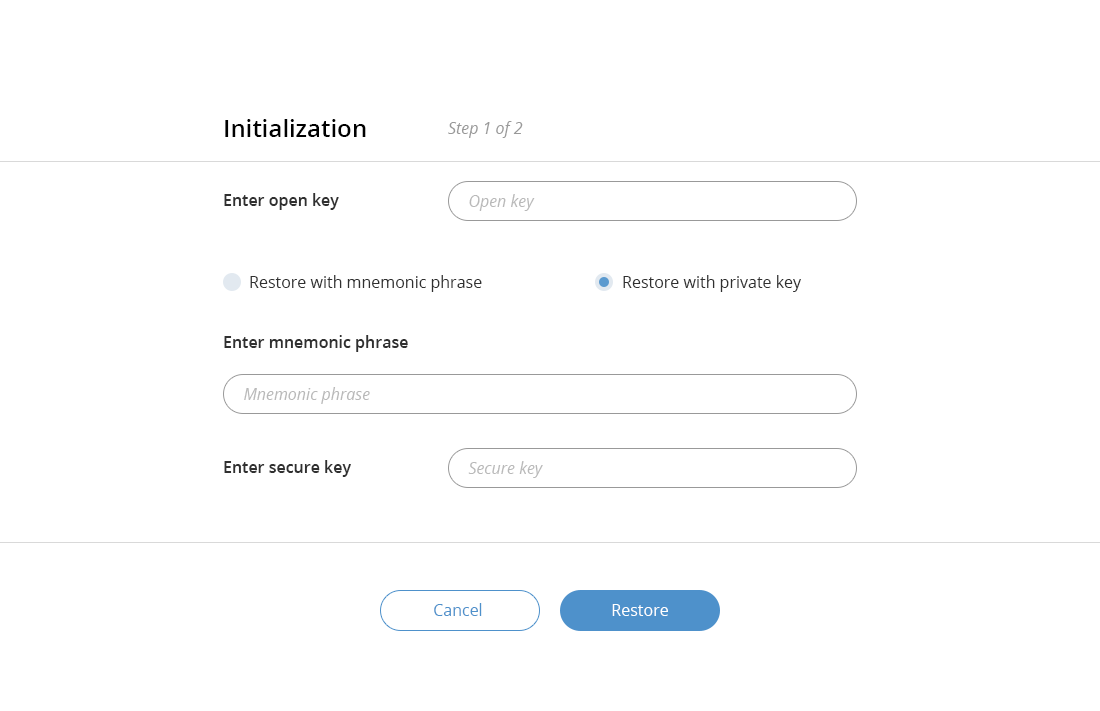
<style>
.page{position:relative;width:1100px;height:711px;background:#ffffff}
.page>*{position:absolute;margin:0}
.t1{font:24px "OpenSans-Semibold";color:#000000}
.t2{font:16px "OpenSans-Italic";color:#999999}
.t3{font:16px "OpenSans-Semibold";color:#303030}
.t4{font:16px "OpenSans-Italic";color:#b9b9b9}
.t5{font:16px "OpenSans";color:#303030}
.t6{font:16px "OpenSans";color:#4e91cb}
.t7{font:16px "OpenSans";color:#ffffff}
</style>
<div class="page">
<p class="t1" style="left:225px;top:119px;width:141px;height:18px">Initialization</p>
<p class="t2" style="left:448px;top:121px;width:75px;height:17px">Step 1 of 2</p>
<p class="t3" style="left:224px;top:193px;width:115px;height:17px">Enter open key</p>
<p class="t4" style="left:469px;top:194px;width:66px;height:17px">Open key</p>
<p class="t5" style="left:250px;top:275px;width:232px;height:17px">Restore with mnemonic phrase</p>
<p class="t5" style="left:623px;top:275px;width:178px;height:17px">Restore with private key</p>
<p class="t3" style="left:224px;top:335px;width:184px;height:17px">Enter mnemonic phrase</p>
<p class="t4" style="left:244px;top:387px;width:126px;height:17px">Mnemonic phrase</p>
<p class="t3" style="left:224px;top:460px;width:127px;height:17px">Enter secure key</p>
<p class="t4" style="left:468px;top:461px;width:75px;height:17px">Secure key</p>
<p class="t6" style="left:434px;top:603px;width:48px;height:13px">Cancel</p>
<p class="t7" style="left:612px;top:604px;width:56px;height:12px">Restore</p>
</div>
